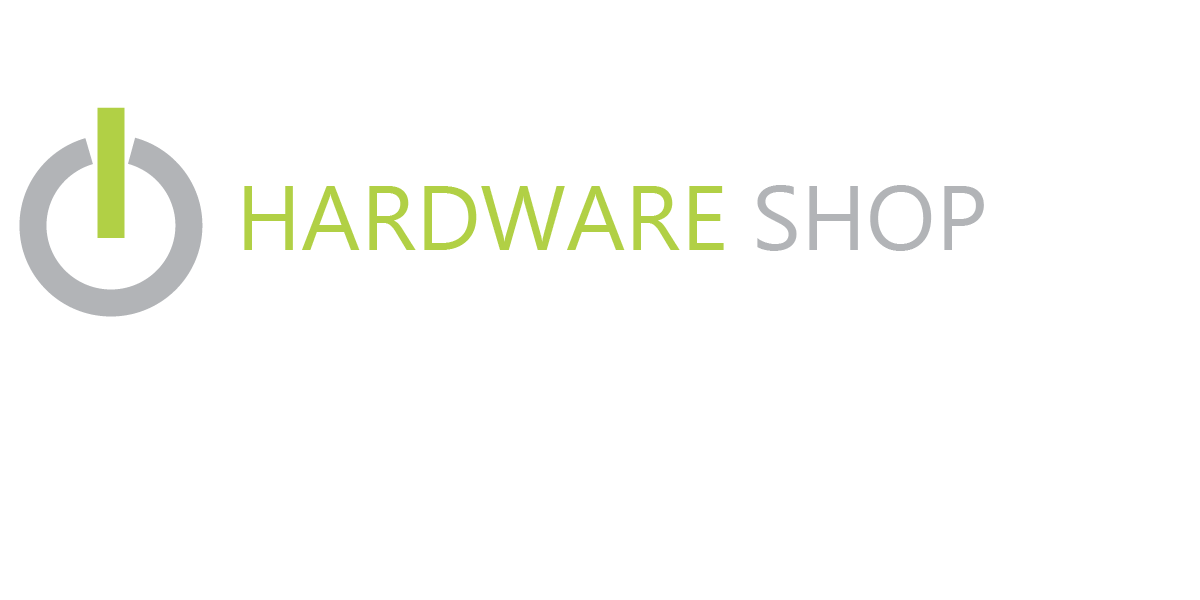
<style>
.page{position:relative;width:1200px;height:600px;background:#ffffff}
.page>*{position:absolute;margin:0}
.t1{font:92px "Ebrima";color:#b1d045}
.t2{font:92px "Ebrima";color:#b2b4b7}
</style>
<div class="page">
<p class="t1" style="left:244px;top:185px;width:740px;height:66px">HARDWARE <span class="t2">SHOP</span></p>
</div>
